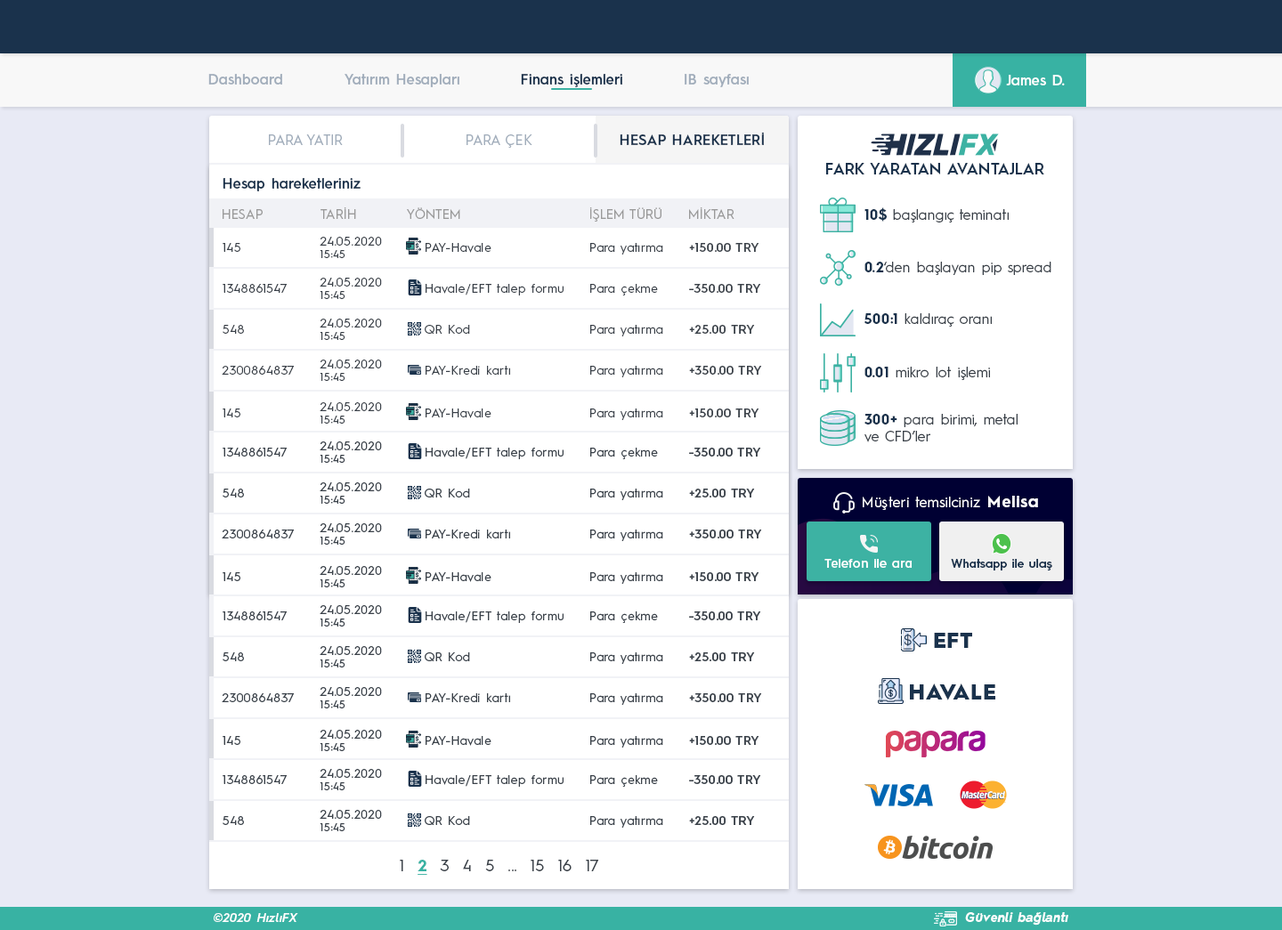
<style>
.page{position:relative;width:1282px;height:930px;background:#ffffff}
.page>*{position:absolute;margin:0}
.t1{font:14.2px "HurmeGeometricSans3-SemiBold";color:#a1adbb}
.t2{font:14.2px "HurmeGeometricSans3-SemiBold";color:#1a324c}
.t3{font:14.2px "HurmeGeometricSans3-SemiBold";color:#fefefe}
.t4{font:14.2px "HurmeGeometricSans1-Regular";letter-spacing:0.01em;color:#a1adbb}
.t5{font:14.2px "HurmeGeometricSans1-SemiBold";letter-spacing:0.01em;color:#1a324c}
.t6{font:16px "HurmeGeometricSans1-SemiBold";color:#1a324c}
.t7{font:13.4px "HurmeGeometricSans1-Regular";color:#999999}
.t8{font:14.2px "HurmeGeometricSans1-Regular";color:#3a4149}
.t9{font:14.2px "HurmeGeometricSans1-Bold";color:#1a324c}
.t10{font:12.5px "HurmeGeometricSans1-Regular";letter-spacing:0.025em;color:#3a4149}
.t11{font:12.5px/12.5px "HurmeGeometricSans1-Regular";letter-spacing:0.025em;color:#3a4149}
.t12{font:10.7px/12.5px "HurmeGeometricSans1-Regular";letter-spacing:0.025em;color:#3a4149}
.t13{font:12.5px "HurmeGeometricSans1-SemiBold";letter-spacing:0.025em;color:#3a4149}
.t14{font:14.2px "HurmeGeometricSans1-Regular";letter-spacing:0.025em;color:#ffffff}
.t15{font:16px "HurmeGeometricSans1-Bold";letter-spacing:0.05em;color:#ffffff}
.t16{font:12.5px "HurmeGeometricSans3-SemiBold";letter-spacing:0.01em;color:#ffffff}
.t17{font:12px "HurmeGeometricSans3-SemiBold";letter-spacing:0.01em;color:#1a324c}
.t18{font:21.4px "HurmeGeometricSans1-Black";letter-spacing:0.025em;color:#1a324c}
.t19{font:16px "HurmeGeometricSans1-Regular";letter-spacing:0.025em;color:#3a4149}
.t20{font:16px "HurmeGeometricSans1-Bold";letter-spacing:0.025em;color:#38b2a3;text-decoration:underline}
.t21{font:12.5px "HurmeGeometricSans2-SemiBoldObl";letter-spacing:0.025em;color:#ffffff}
.t22{font:12.5px "HurmeGeometricSans2-BoldObl";letter-spacing:0.025em;color:#ffffff}
</style>
<div class="page">
<p class="t1" style="left:208px;top:74px;width:74px;height:11px">Dashboard</p>
<p class="t1" style="left:344px;top:74px;width:115px;height:13px">Yatırım Hesapları</p>
<p class="t2" style="left:521px;top:74px;width:101px;height:13px">Finans işlemleri</p>
<p class="t1" style="left:685px;top:74px;width:64px;height:13px">IB sayfası</p>
<p class="t3" style="left:1006px;top:75px;width:59px;height:10px">James D.</p>
<p class="t4" style="left:269px;top:134px;width:74px;height:11px">PARA YATIR</p>
<p class="t4" style="left:466px;top:134px;width:66px;height:14px">PARA ÇEK</p>
<p class="t5" style="left:620px;top:132px;width:144px;height:13px">HESAP HAREKETLERİ</p>
<p class="t6" style="left:826px;top:163px;width:218px;height:11px">FARK YARATAN AVANTAJLAR</p>
<p class="t2" style="left:223px;top:178px;width:138px;height:13px">Hesap hareketleriniz</p>
<p class="t7" style="left:223px;top:209px;width:40px;height:10px">HESAP</p>
<p class="t7" style="left:320px;top:207px;width:36px;height:12px">TARİH</p>
<p class="t7" style="left:407px;top:207px;width:53px;height:12px">YÖNTEM</p>
<p class="t7" style="left:589px;top:207px;width:72px;height:15px">İŞLEM TÜRÜ</p>
<p class="t7" style="left:689px;top:207px;width:45px;height:12px">MİKTAR</p>
<p class="t8" style="left:864px;top:207px;width:145px;height:16px"><span class="t9">10$</span> başlangıç teminatı</p>
<p class="t10" style="left:223px;top:243px;width:17px;height:9px">145</p>
<p class="t11" style="left:320px;top:237px;width:62px;height:21px">24.05.2020<br><span class="t12">15:45</span></p>
<p class="t10" style="left:426px;top:243px;width:65px;height:10px">PAY-Havale</p>
<p class="t10" style="left:590px;top:243px;width:73px;height:12px">Para yatırma</p>
<p class="t13" style="left:689px;top:243px;width:70px;height:9px">+150.00 TRY</p>
<p class="t8" style="left:864px;top:262px;width:187px;height:13px"><span class="t9">0.2</span>‘den başlayan pip spread</p>
<p class="t11" style="left:320px;top:278px;width:62px;height:21px">24.05.2020<br><span class="t12">15:45</span></p>
<p class="t10" style="left:223px;top:284px;width:65px;height:9px">1348861547</p>
<p class="t10" style="left:426px;top:284px;width:137px;height:12px">Havale/EFT talep formu</p>
<p class="t10" style="left:590px;top:284px;width:68px;height:12px">Para çekme</p>
<p class="t13" style="left:689px;top:284px;width:72px;height:9px">-350.00 TRY</p>
<p class="t8" style="left:863px;top:313px;width:129px;height:14px"><span class="t9">500:1</span> kaldıraç oranı</p>
<p class="t10" style="left:223px;top:325px;width:21px;height:9px">548</p>
<p class="t11" style="left:320px;top:319px;width:62px;height:21px">24.05.2020<br><span class="t12">15:45</span></p>
<p class="t10" style="left:425px;top:325px;width:45px;height:9px">QR Kod</p>
<p class="t10" style="left:590px;top:325px;width:73px;height:11px">Para yatırma</p>
<p class="t13" style="left:689px;top:325px;width:66px;height:9px">+25.00 TRY</p>
<p class="t10" style="left:222px;top:366px;width:73px;height:9px">2300864837</p>
<p class="t11" style="left:320px;top:360px;width:62px;height:21px">24.05.2020<br><span class="t12">15:45</span></p>
<p class="t10" style="left:426px;top:366px;width:84px;height:9px">PAY-Kredi kartı</p>
<p class="t10" style="left:590px;top:366px;width:73px;height:11px">Para yatırma</p>
<p class="t13" style="left:689px;top:366px;width:73px;height:9px">+350.00 TRY</p>
<p class="t8" style="left:864px;top:367px;width:126px;height:13px"><span class="t9">0.01</span> mikro lot işlemi</p>
<p class="t10" style="left:223px;top:409px;width:17px;height:8px">145</p>
<p class="t11" style="left:320px;top:402px;width:62px;height:22px">24.05.2020<br><span class="t12">15:45</span></p>
<p class="t10" style="left:426px;top:409px;width:65px;height:9px">PAY-Havale</p>
<p class="t10" style="left:590px;top:409px;width:73px;height:11px">Para yatırma</p>
<p class="t13" style="left:689px;top:409px;width:70px;height:8px">+150.00 TRY</p>
<p class="t8" style="left:864px;top:414px;width:153px;height:28px"><span class="t9">300+</span> para birimi, metal<br>ve CFD’ler</p>
<p class="t14" style="left:863px;top:496px;width:175px;height:14px">Müşteri temsilciniz <span class="t15">Melisa</span></p>
<p class="t16" style="left:824px;top:559px;width:88px;height:9px">Telefon ile ara</p>
<p class="t17" style="left:951px;top:559px;width:101px;height:12px">Whatsapp ile ulaş</p>
<p class="t18" style="left:934px;top:633px;width:38px;height:15px">EFT</p>
<p class="t18" style="left:910px;top:684px;width:85px;height:17px">HAVALE</p>
<p class="t19" style="left:400px;top:860px;width:199px;height:15px">1  <span class="t20">2</span>  3  4  5  ...  15  16  17</p>
<p class="t21" style="left:214px;top:913px;width:84px;height:9px">©2020 HızlıFX</p>
<p class="t22" style="left:965px;top:912px;width:103px;height:14px">Güvenli bağlantı</p>
</div>
